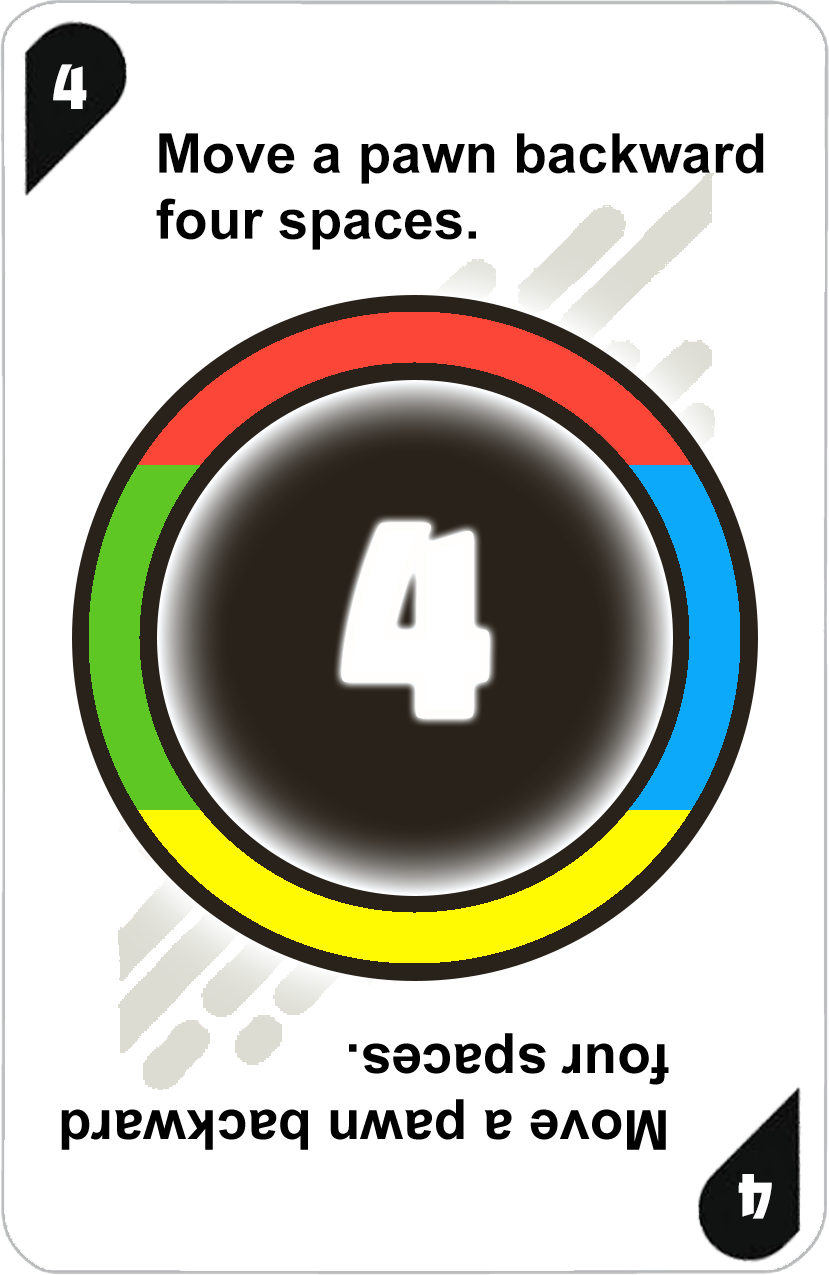
<style>
.page{position:relative;width:829px;height:1275px;background:#ffffff}
.page>*{position:absolute;margin:0}
.t1{font:72px "AdGothic-Regular";color:#ffffff}
.t2{font:55px "Arial-BoldMT";color:#000000}
.t3{font:300px "AdGothic-Regular";color:#ffffff}
</style>
<div class="page">
<p class="t1" style="left:53px;top:64px;width:34px;height:45px">4</p>
<p class="t2" style="left:156px;top:133px;width:608px;height:117px">Move a pawn backward<br>four spaces.</p>
<p class="t3" style="left:346px;top:527px;width:139px;height:187px">4</p>
</div>
